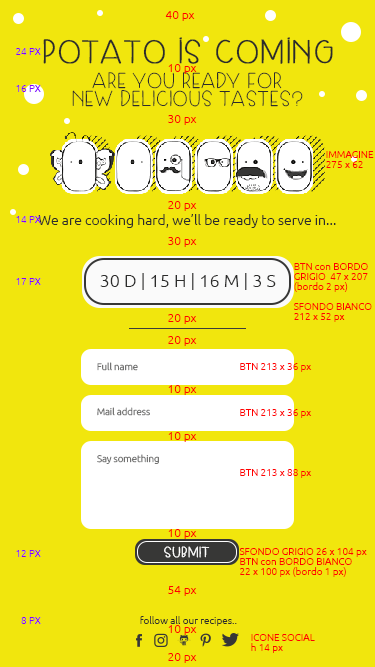
<style>
.page{position:relative;width:375px;height:667px;background:#f1e60d}
.page>*{position:absolute;margin:0}
.t1{font:12px "Ubuntu-Light";color:#ff0000}
.t2{font:32px "SkipLegDay";color:#2c2c2b;font-weight:bold}
.t3{font:10px "Ubuntu-Light";color:#8400ff}
.t4{font:21px/18px "SkipLegDay";color:#2c2c2b}
.t5{font:10px/10px "Ubuntu-Light";color:#ff0000}
.t6{font:10px/30px "Ubuntu-Light";color:#ff0000}
.t7{font:14px "Ubuntu-Light";color:#2c2c2b}
.t8{font:18px "Ubuntu-Light";color:#2c2c2b;text-transform:uppercase}
.t9{font:9.6px "Ubuntu-Light";color:#737372}
.t10{font:14px "SkipLegDay";color:#ffffff;font-weight:bold}
.t11{font:10px "Ubuntu-Light";color:#2c2c2b}
</style>
<div class="page">
<p class="t1" style="left:165px;top:11px;width:30px;height:10px">40 px</p>
<p class="t2" style="left:43px;top:37px;width:290px;height:27px">potato is coming</p>
<p class="t3" style="left:16px;top:48px;width:25px;height:7px">24 PX</p>
<p class="t1" style="left:168px;top:64px;width:29px;height:10px">10 px</p>
<p class="t4" style="left:72px;top:72px;width:231px;height:35px;text-align:center">ARE YOU READY FOR <br>NEW DELICIOUS TASTES?</p>
<p class="t3" style="left:16px;top:85px;width:25px;height:7px">16 PX</p>
<p class="t1" style="left:168px;top:115px;width:29px;height:10px">30 px</p>
<p class="t5" style="left:326px;top:151px;width:48px;height:17px">IMMAGINE<br>275 x 62<br><span class="t6"><br><br>BTN<br>BTN</span></p>
<p class="t1" style="left:168px;top:201px;width:29px;height:10px">20 px</p>
<p class="t3" style="left:16px;top:216px;width:25px;height:7px">14 PX</p>
<p class="t7" style="left:38px;top:214px;width:298px;height:14px">We are cooking hard, we’ll be ready to serve in...</p>
<p class="t1" style="left:168px;top:237px;width:29px;height:10px">30 px</p>
<p class="t5" style="left:294px;top:263px;width:78px;height:59px">BTN con BORDO GRIGIO  47 x 207 (bordo 2 px) <br><br>SFONDO BIANCO<br>212 x 52 px<br><span class="t6"><br><br>BTN<br>BTN</span></p>
<p class="t3" style="left:16px;top:278px;width:25px;height:7px">17 PX</p>
<p class="t8" style="left:100px;top:273px;width:176px;height:17px">30 d | 15 H | 16 M | 3 s</p>
<p class="t1" style="left:168px;top:314px;width:29px;height:10px">20 px</p>
<p class="t1" style="left:168px;top:336px;width:29px;height:10px">20 px</p>
<p class="t9" style="left:97px;top:362px;width:41px;height:9px">Full name</p>
<p class="t5" style="left:240px;top:363px;width:72px;height:9px">BTN 213 x 36 px<br><span class="t6"><br><br>BTN<br>BTN</span></p>
<p class="t1" style="left:168px;top:385px;width:29px;height:10px">10 px</p>
<p class="t9" style="left:97px;top:407px;width:53px;height:9px">Mail address</p>
<p class="t5" style="left:240px;top:409px;width:72px;height:9px">BTN 213 x 36 px<br><span class="t6"><br><br>BTN<br>BTN</span></p>
<p class="t1" style="left:168px;top:432px;width:29px;height:10px">10 px</p>
<p class="t9" style="left:97px;top:454px;width:62px;height:10px">Say something</p>
<p class="t5" style="left:240px;top:469px;width:72px;height:9px">BTN 213 x 88 px<br><span class="t6"><br><br>BTN<br>BTN</span></p>
<p class="t1" style="left:168px;top:529px;width:29px;height:10px">10 px</p>
<p class="t3" style="left:16px;top:550px;width:25px;height:7px">12 PX</p>
<p class="t10" style="left:164px;top:546px;width:46px;height:12px">SUBMIT</p>
<p class="t5" style="left:239px;top:548px;width:128px;height:29px">SFONDO GRIGIO 26 x 104 px<br>BTN con BORDO BIANCO <br>22 x 100 px (bordo 1 px)<br><span class="t6"><br><br>BTN<br>BTN</span></p>
<p class="t1" style="left:168px;top:586px;width:29px;height:10px">54 px</p>
<p class="t3" style="left:21px;top:617px;width:20px;height:7px">8 PX</p>
<p class="t11" style="left:140px;top:616px;width:97px;height:10px">follow all our recipes..</p>
<p class="t1" style="left:168px;top:625px;width:29px;height:10px">10 px</p>
<p class="t5" style="left:251px;top:634px;width:64px;height:19px">ICONE SOCIAL<br>h 14 px<br><span class="t6"><br><br>BTN<br>BTN</span></p>
<p class="t1" style="left:168px;top:653px;width:29px;height:10px">20 px</p>
</div>
